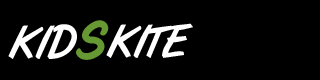
<style>
.page{position:relative;width:320px;height:80px;background:#000000}
.page>*{position:absolute;margin:0}
.t1{font:45.5px "ArtBrush";color:#ffffff;text-transform:uppercase}
.t2{font:53.7px "FilbertBrush-PERSONALUSEONLY";color:#669933;text-transform:uppercase}
</style>
<div class="page">
<p class="t1" style="left:8px;top:24px;width:69px;height:35px">Kid</p>
<p class="t2" style="left:76px;top:20px;width:33px;height:40px">s</p>
<p class="t1" style="left:106px;top:23px;width:87px;height:35px">Kite</p>
</div>
